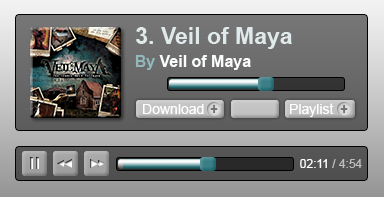
<style>
.page{position:relative;width:384px;height:197px}
.page>*{position:absolute;margin:0}
.t1{font:23px "Arial-BoldMT";color:#ececec}
.t2{font:16px "Arial-BoldMT";color:#fdfdfd}
.t3{font:16px "Arial-BoldMT";color:#bebebe}
.t4{font:14px "ArialMT";color:#ffffff}
.t5{font:14px "Arial-BoldMT";color:#727272}
.t6{font:12px "ArialMT";color:#bebebe}
.t7{font:12px "ArialMT";color:#ffffff}
</style>
<div class="page">
<p class="t1" style="left:136px;top:27px;width:156px;height:22px">3. Veil of Maya</p>
<p class="t2" style="left:135px;top:55px;width:116px;height:15px"><span class="t3">By </span>Veil of Maya</p>
<p class="t4" style="left:143px;top:104px;width:61px;height:10px">Download</p>
<p class="t5" style="left:210px;top:105px;width:8px;height:8px">+</p>
<p class="t4" style="left:290px;top:103px;width:44px;height:14px">Playlist</p>
<p class="t5" style="left:340px;top:105px;width:8px;height:8px">+</p>
<p class="t6" style="left:300px;top:159px;width:62px;height:9px"><span class="t7">02:11 </span>/ 4:54</p>
</div>
